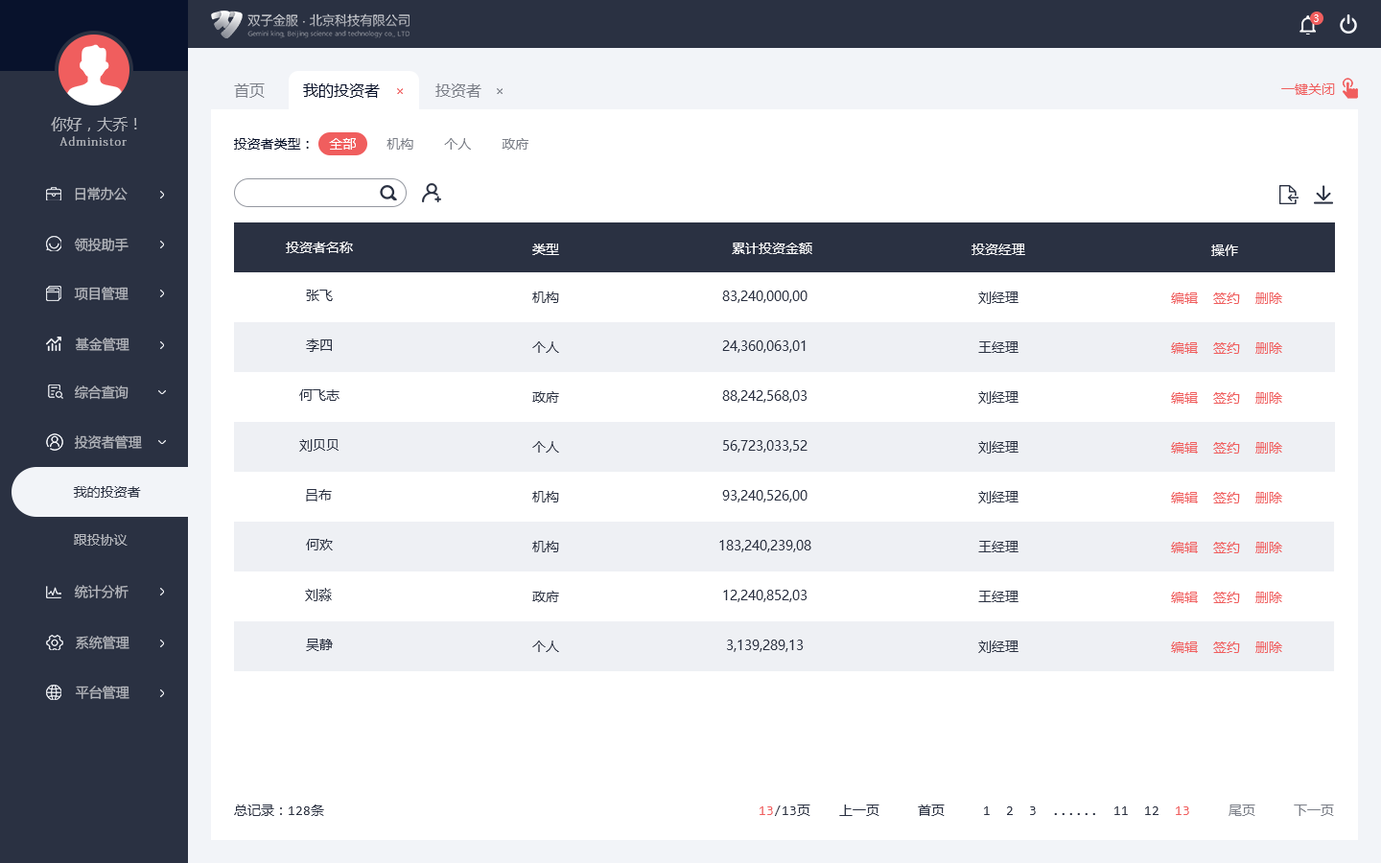
<style>
.page{position:relative;width:1381px;height:863px;background:#ffffff}
.page>*{position:absolute;margin:0}
.t1{font:9.6px "MicrosoftYaHeiUI";color:#ffffff}
.t2{font:15.3px "MicrosoftYaHeiMono";color:#7b7f88}
.t3{font:15.3px "MicrosoftYaHeiMono";color:#08122c}
.t4{font:13.4px "MicrosoftYaHeiMono";color:#f05e5e}
.t5{font:15.3px "MicrosoftYaHeiMono";color:#b4b7bd}
.t6{font:11.5px "AdobeFangsongStd-Regular";letter-spacing:0.1em;color:#b4b7bd}
.t7{font:13.4px "MicrosoftYaHeiMono";color:#7b7f88}
.t8{font:13.4px "MicrosoftYaHeiMono";color:#08122c}
.t9{font:13.4px "MicrosoftYaHeiMono";color:#ffffff}
.t10{font:13.4px "MicrosoftYaHeiUI";color:#b4b7bd}
.t11{font:13.4px "MicrosoftYaHeiMono";color:#2a3142}
.t12{font:13.4px "MicrosoftYaHeiUI";color:#2a3142}
</style>
<div class="page">
<p class="t1" style="left:1314px;top:14px;width:5px;height:8px">3</p>
<p class="t2" style="left:234px;top:83px;width:31px;height:15px">首页</p>
<p class="t3" style="left:303px;top:83px;width:77px;height:15px">我的投资者</p>
<p class="t2" style="left:435px;top:83px;width:47px;height:15px">投资者</p>
<p class="t4" style="left:1282px;top:83px;width:53px;height:12px">一键关闭</p>
<p class="t5" style="left:51px;top:117px;width:86px;height:14px">你好，大乔！</p>
<p class="t6" style="left:59px;top:136px;width:68px;height:10px">Administor</p>
<p class="t7" style="left:234px;top:138px;width:295px;height:12px"><span class="t8">投资者类型：  </span><span class="t9">全部    </span>机构    个人    政府</p>
<p class="t10" style="left:75px;top:187px;width:53px;height:13px">日常办公</p>
<p class="t10" style="left:74px;top:238px;width:55px;height:13px">领投助手</p>
<p class="t9" style="left:286px;top:242px;width:67px;height:11px">投资者名称</p>
<p class="t9" style="left:532px;top:244px;width:27px;height:11px">类型</p>
<p class="t9" style="left:732px;top:243px;width:80px;height:11px">累计投资金额</p>
<p class="t9" style="left:972px;top:244px;width:53px;height:11px">投资经理</p>
<p class="t9" style="left:1211px;top:245px;width:27px;height:11px">操作</p>
<p class="t10" style="left:74px;top:287px;width:55px;height:14px">项目管理</p>
<p class="t11" style="left:306px;top:290px;width:27px;height:11px">张飞</p>
<p class="t11" style="left:532px;top:292px;width:27px;height:11px">机构</p>
<p class="t12" style="left:722px;top:291px;width:86px;height:12px">83,240,000,00</p>
<p class="t11" style="left:978px;top:292px;width:41px;height:12px">刘经理</p>
<p class="t4" style="left:1171px;top:293px;width:111px;height:11px">编辑  签约  删除</p>
<p class="t10" style="left:75px;top:338px;width:54px;height:13px">基金管理</p>
<p class="t11" style="left:306px;top:339px;width:26px;height:13px">李四</p>
<p class="t11" style="left:532px;top:341px;width:27px;height:12px">个人</p>
<p class="t12" style="left:722px;top:341px;width:84px;height:12px">24,360,063,01</p>
<p class="t11" style="left:978px;top:341px;width:41px;height:12px">王经理</p>
<p class="t4" style="left:1171px;top:342px;width:111px;height:12px">编辑  签约  删除</p>
<p class="t10" style="left:74px;top:386px;width:55px;height:14px">综合查询</p>
<p class="t11" style="left:299px;top:389px;width:41px;height:12px">何飞志</p>
<p class="t11" style="left:532px;top:391px;width:27px;height:12px">政府</p>
<p class="t12" style="left:722px;top:390px;width:86px;height:13px">88,242,568,03</p>
<p class="t11" style="left:978px;top:391px;width:41px;height:13px">刘经理</p>
<p class="t4" style="left:1171px;top:392px;width:111px;height:12px">编辑  签约  删除</p>
<p class="t10" style="left:74px;top:435px;width:68px;height:14px">投资者管理</p>
<p class="t11" style="left:299px;top:439px;width:40px;height:13px">刘贝贝</p>
<p class="t11" style="left:532px;top:441px;width:27px;height:12px">个人</p>
<p class="t12" style="left:723px;top:440px;width:85px;height:13px">56,723,033,52</p>
<p class="t11" style="left:978px;top:441px;width:41px;height:13px">刘经理</p>
<p class="t4" style="left:1171px;top:442px;width:111px;height:12px">编辑  签约  删除</p>
<p class="t12" style="left:73px;top:486px;width:68px;height:12px">我的投资者</p>
<p class="t11" style="left:306px;top:489px;width:26px;height:13px">吕布</p>
<p class="t11" style="left:532px;top:491px;width:27px;height:12px">机构</p>
<p class="t12" style="left:722px;top:490px;width:86px;height:13px">93,240,526,00</p>
<p class="t11" style="left:978px;top:491px;width:41px;height:13px">刘经理</p>
<p class="t4" style="left:1171px;top:492px;width:111px;height:12px">编辑  签约  删除</p>
<p class="t10" style="left:74px;top:534px;width:54px;height:12px">跟投协议</p>
<p class="t11" style="left:306px;top:539px;width:27px;height:12px">何欢</p>
<p class="t11" style="left:532px;top:541px;width:27px;height:12px">机构</p>
<p class="t12" style="left:719px;top:540px;width:92px;height:13px">183,240,239,08</p>
<p class="t11" style="left:978px;top:541px;width:41px;height:12px">王经理</p>
<p class="t4" style="left:1171px;top:542px;width:111px;height:11px">编辑  签约  删除</p>
<p class="t10" style="left:74px;top:585px;width:55px;height:14px">统计分析</p>
<p class="t11" style="left:305px;top:588px;width:27px;height:13px">刘淼</p>
<p class="t11" style="left:532px;top:591px;width:27px;height:11px">政府</p>
<p class="t12" style="left:723px;top:590px;width:85px;height:12px">12,240,852,03</p>
<p class="t11" style="left:978px;top:591px;width:41px;height:11px">王经理</p>
<p class="t4" style="left:1171px;top:592px;width:111px;height:11px">编辑  签约  删除</p>
<p class="t10" style="left:75px;top:636px;width:54px;height:13px">系统管理</p>
<p class="t11" style="left:306px;top:639px;width:27px;height:12px">吴静</p>
<p class="t11" style="left:532px;top:641px;width:27px;height:11px">个人</p>
<p class="t12" style="left:727px;top:640px;width:77px;height:12px">3,139,289,13</p>
<p class="t11" style="left:978px;top:641px;width:41px;height:12px">刘经理</p>
<p class="t4" style="left:1171px;top:642px;width:111px;height:11px">编辑  签约  删除</p>
<p class="t10" style="left:75px;top:686px;width:54px;height:13px">平台管理</p>
<p class="t11" style="left:234px;top:805px;width:90px;height:11px">总记录：128条</p>
<p class="t11" style="left:760px;top:805px;width:51px;height:11px"><span class="t4">13</span>/13页</p>
<p class="t11" style="left:839px;top:805px;width:495px;height:11px">上一页     首页     1  2  3  ......  11  12  <span class="t4">13     </span><span class="t7">尾页     下一页</span></p>
</div>
